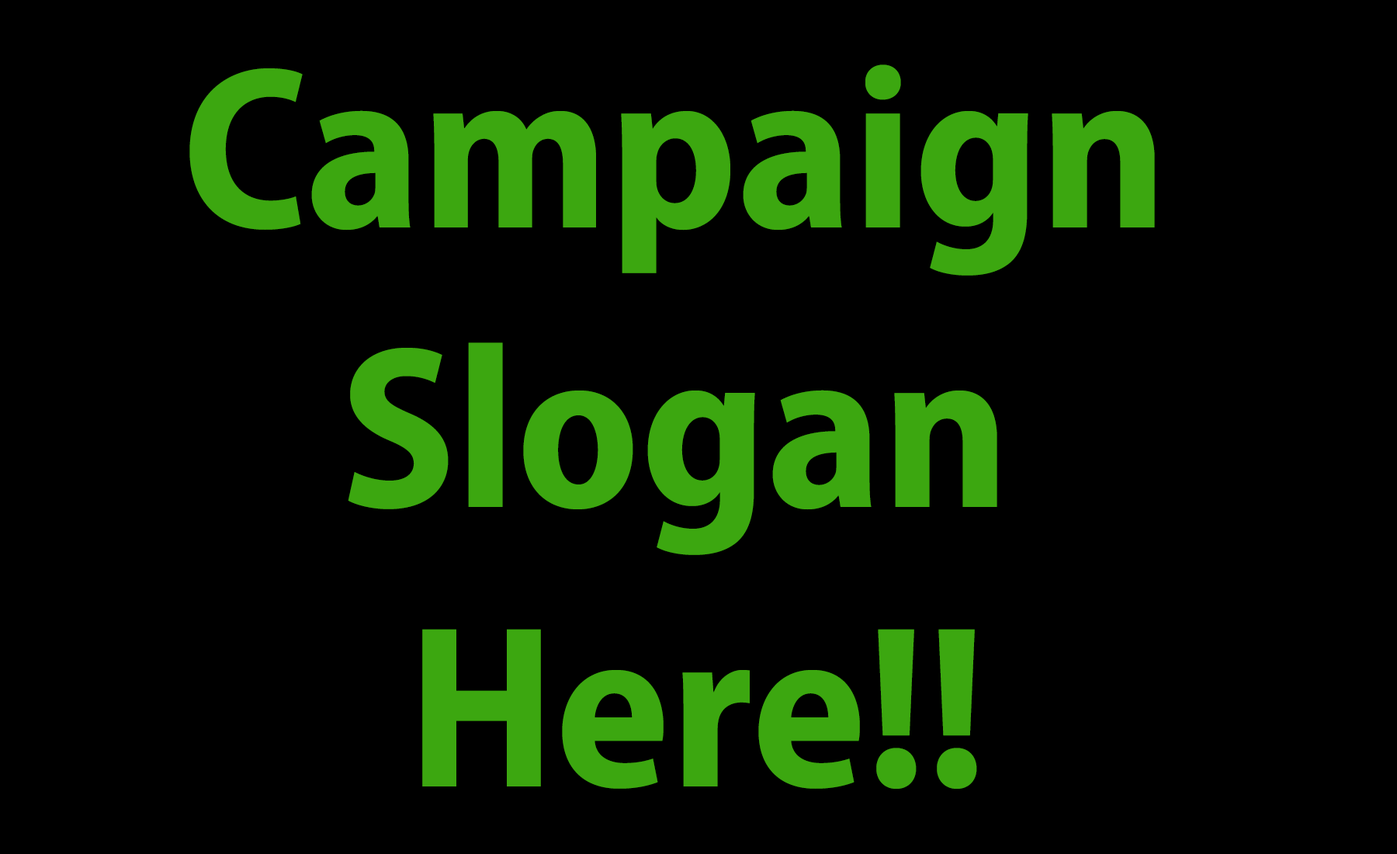
<style>
.page{position:relative;width:1397px;height:854px;background:#000000}
.page>*{position:absolute;margin:0}
.t1{font:232.8px "MyriadPro-BoldSemiCn";color:#3ca710}
</style>
<div class="page">
<p class="t1" style="left:189px;top:64px;width:966px;height:724px;text-align:center">Campaign <br>Slogan <br>Here!!</p>
</div>
